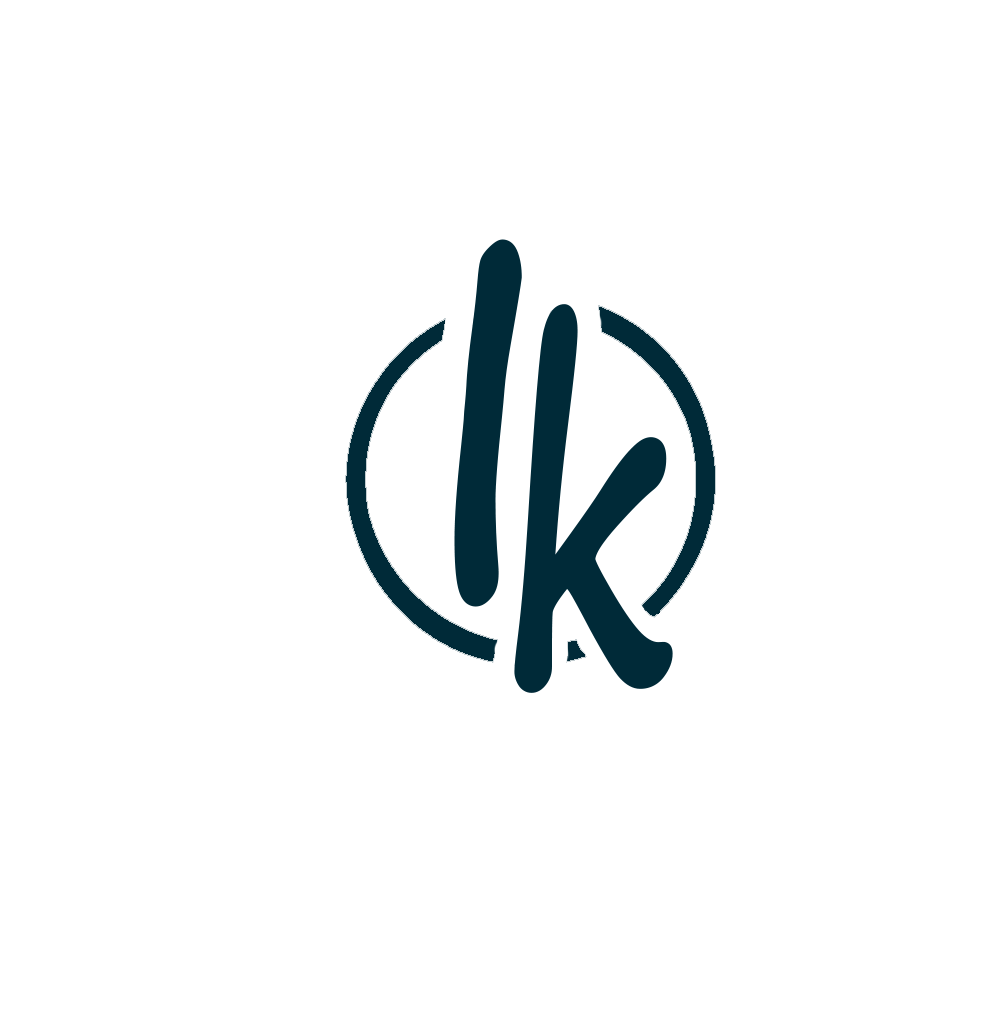
<style>
.page{position:relative;width:989px;height:1027px;background:#ffffff}
.page>*{position:absolute;margin:0}
.t1{font:488px "SegoePrint";letter-spacing:-0.1em;color:#002a38;font-weight:bold;scale:0.69 1}
.t2{font:448px "SegoePrint";letter-spacing:-0.1em;color:#002a38;font-weight:bold;scale:0.63 1}
</style>
<div class="page">
<p class="t1" style="left:454px;top:239px;width:68px;height:368px">I</p>
<p class="t2" style="left:514px;top:304px;width:159px;height:389px">k</p>
</div>
